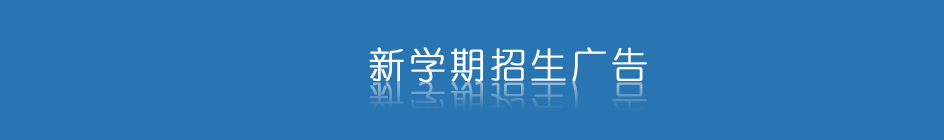
<style>
.page{position:relative;width:944px;height:140px;background:#2975b1}
.page>*{position:absolute;margin:0}
.t1{font:36px "YouYuan";letter-spacing:0.1em;color:#ffffff;font-weight:bold}
.t2{font:36px "YouYuan";letter-spacing:0.1em;font-weight:bold}
</style>
<div class="page">
<p class="t1" style="left:369px;top:47px;width:278px;height:36px">新学期招生广告</p>
<p class="t2" style="left:369px;top:81px;width:278px;height:36px">新学期招生广告</p>
</div>
